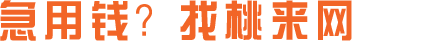
<style>
.page{position:relative;width:431px;height:41px;background:#ffffff}
.page>*{position:absolute;margin:0}
.t1{font:44px "FZZYJW--GB1-0";letter-spacing:0.13em;color:#f26527;scale:0.91 1}
</style>
<div class="page">
<p class="t1" style="left:0px;top:0px;width:352px;height:41px">急用钱？找桃来网</p>
</div>
